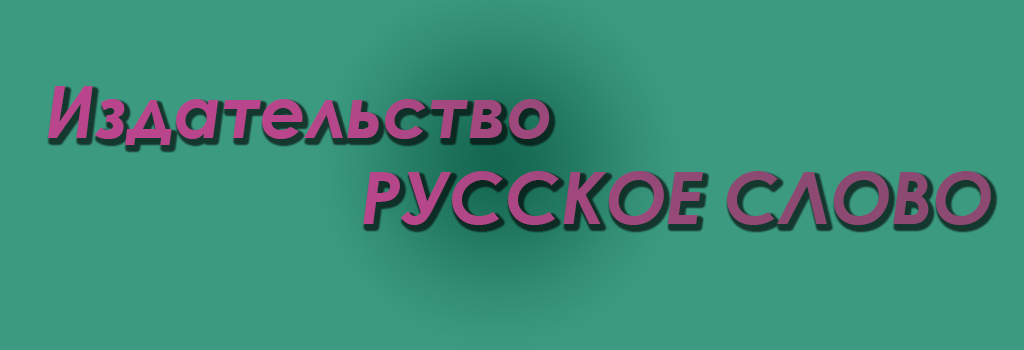
<style>
.page{position:relative;width:1024px;height:350px;background:#3b9a80}
.page>*{position:absolute;margin:0}
.t1{font:72px "CenturyGothic-BoldItalic";color:#a54881}
</style>
<div class="page">
<p class="t1" style="left:48px;top:86px;width:943px;height:139px">Издательство<br>РУССКОЕ СЛОВО</p>
</div>
